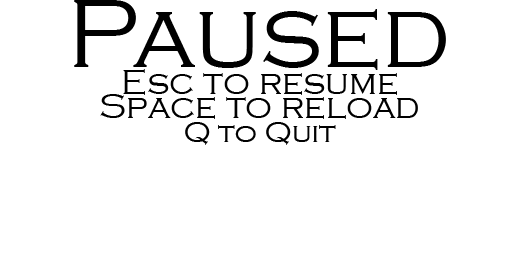
<style>
.page{position:relative;width:512px;height:256px;background:#ffffff}
.page>*{position:absolute;margin:0}
.t1{font:100px "CopperplateGothic-Light";color:#000000}
.t2{font:36px/24px "CopperplateGothic-Light";color:#000000}
.t3{font:30px/24px "CopperplateGothic-Light";color:#000000}
</style>
<div class="page">
<p class="t1" style="left:74px;top:0px;width:372px;height:70px">Paused</p>
<p class="t2" style="left:100px;top:69px;width:318px;height:76px;text-align:center">Esc to resume<br>Space to reload<br><span class="t3">Q to Quit</span></p>
</div>
